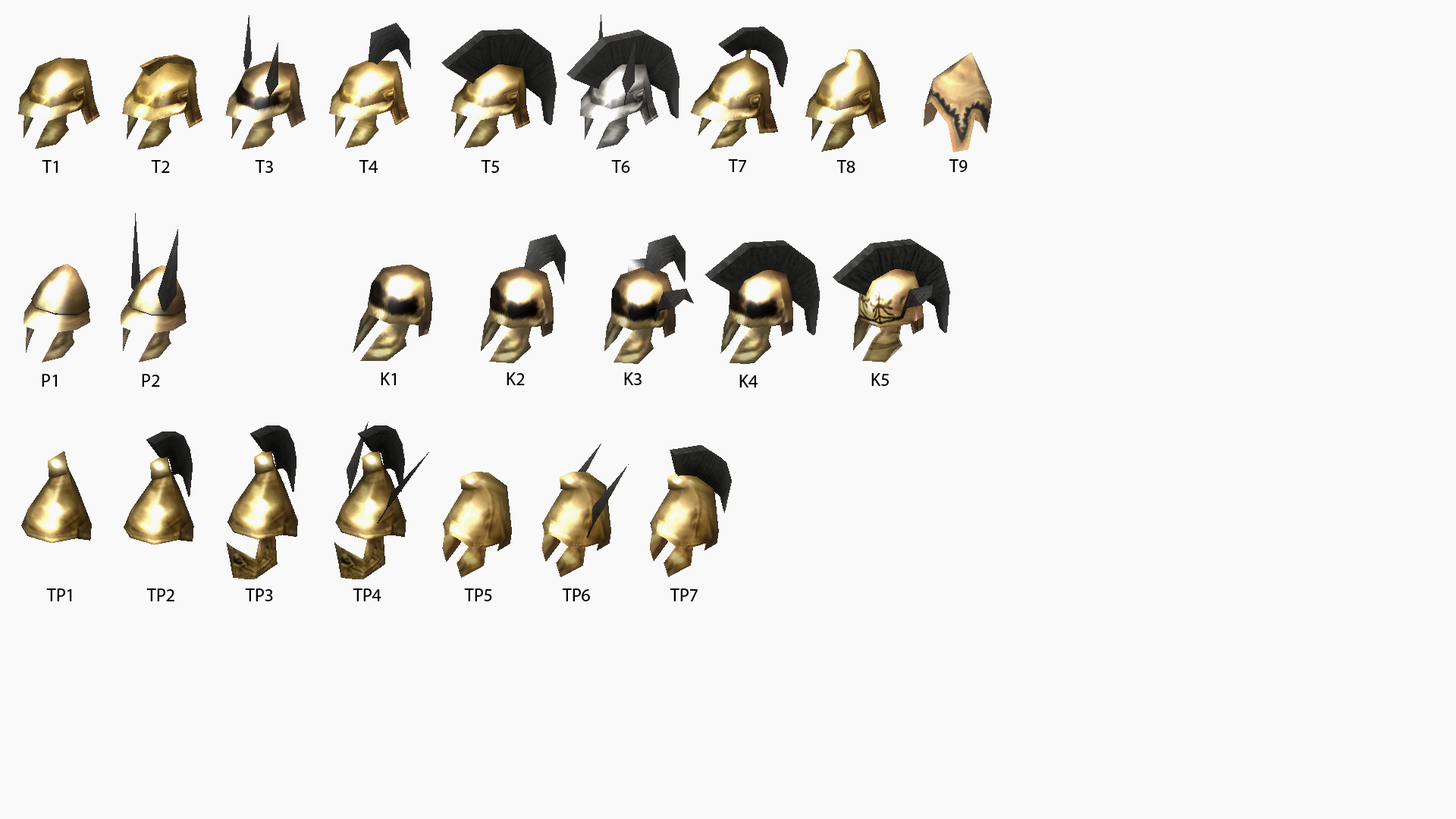
<style>
.page{position:relative;width:1456px;height:819px;background:#f9f9f9}
.page>*{position:absolute;margin:0}
.t1{font:18.2px "MyriadPro-Regular";color:#000000}
</style>
<div class="page">
<p class="t1" style="left:42px;top:160px;width:16px;height:13px">T1</p>
<p class="t1" style="left:151px;top:160px;width:19px;height:13px">T2</p>
<p class="t1" style="left:255px;top:160px;width:18px;height:13px">T3</p>
<p class="t1" style="left:359px;top:160px;width:19px;height:13px">T4</p>
<p class="t1" style="left:481px;top:160px;width:18px;height:13px">T5</p>
<p class="t1" style="left:611px;top:160px;width:19px;height:13px">T6</p>
<p class="t1" style="left:728px;top:159px;width:19px;height:13px">T7</p>
<p class="t1" style="left:836px;top:160px;width:19px;height:13px">T8</p>
<p class="t1" style="left:949px;top:159px;width:19px;height:13px">T9</p>
<p class="t1" style="left:42px;top:374px;width:15px;height:13px">P1</p>
<p class="t1" style="left:142px;top:374px;width:18px;height:13px">P2</p>
<p class="t1" style="left:381px;top:372px;width:15px;height:13px">K1</p>
<p class="t1" style="left:507px;top:372px;width:18px;height:13px">K2</p>
<p class="t1" style="left:624px;top:372px;width:18px;height:13px">K3</p>
<p class="t1" style="left:739px;top:375px;width:19px;height:13px">K4</p>
<p class="t1" style="left:871px;top:373px;width:18px;height:13px">K5</p>
<p class="t1" style="left:46px;top:588px;width:26px;height:13px">TP1</p>
<p class="t1" style="left:146px;top:588px;width:28px;height:13px">TP2</p>
<p class="t1" style="left:245px;top:588px;width:28px;height:13px">TP3</p>
<p class="t1" style="left:353px;top:588px;width:28px;height:13px">TP4</p>
<p class="t1" style="left:464px;top:588px;width:28px;height:13px">TP5</p>
<p class="t1" style="left:562px;top:588px;width:28px;height:13px">TP6</p>
<p class="t1" style="left:670px;top:588px;width:28px;height:13px">TP7</p>
</div>
